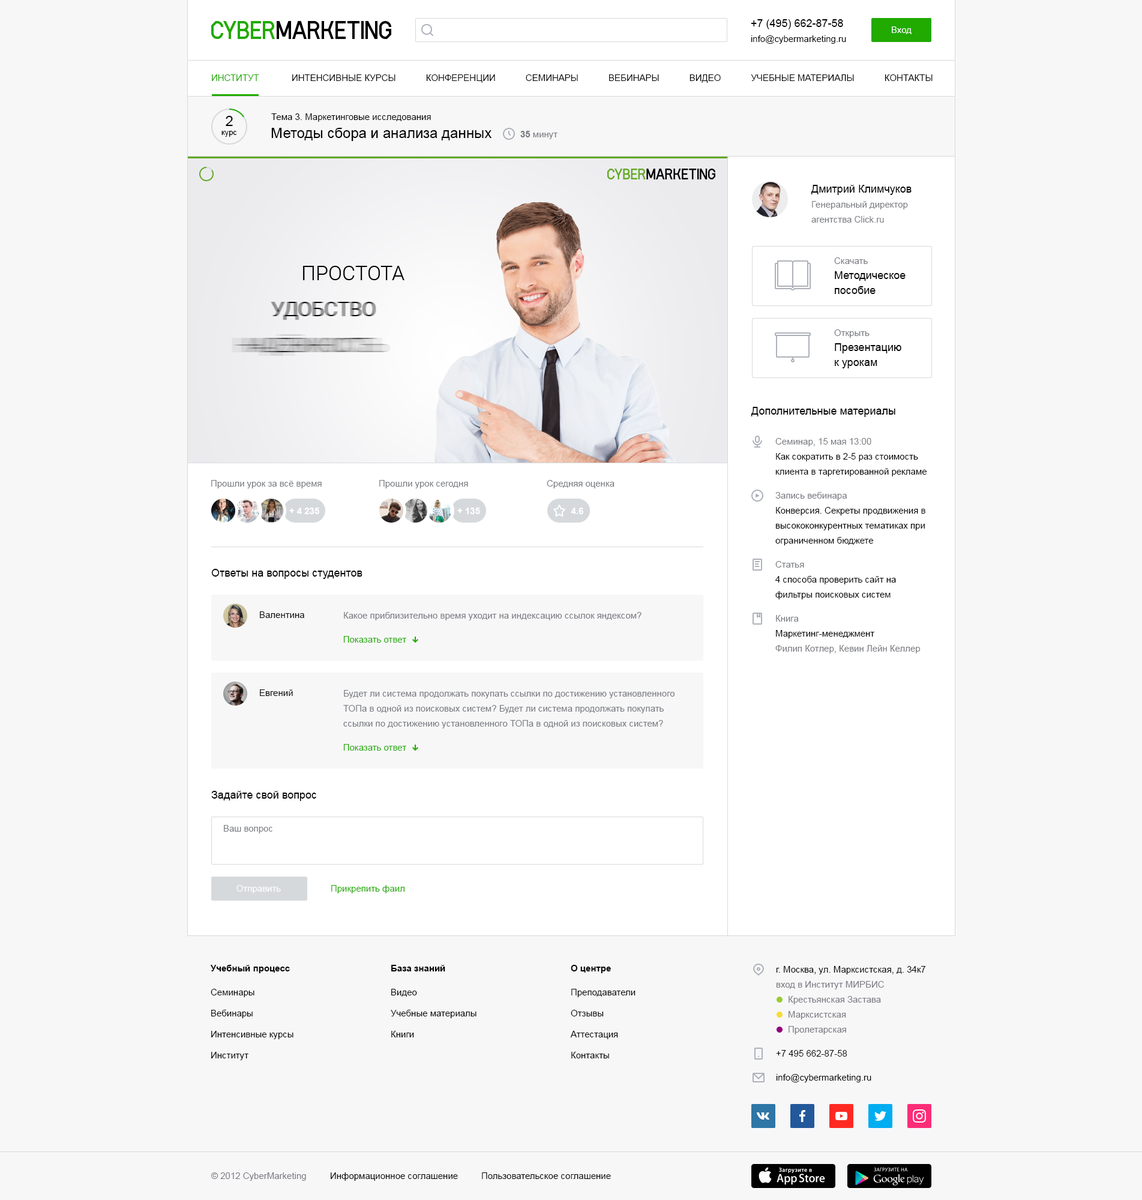
<style>
.page{position:relative;width:1142px;height:1200px;background:#f7f7f8}
.page>*{position:absolute;margin:0}
.t1{font:10.8px "ArialMT";color:#000000}
.t2{font:9px "ArialMT";color:#ffffff}
.t3{font:9px "ArialMT";color:#000000}
.t4{font:9px "ArialMT";color:#000000;text-transform:uppercase}
.t5{font:9px "ArialMT";color:#21aa00;text-transform:uppercase}
.t6{font:14.4px "ArialMT";color:#000000}
.t7{font:7.8px "ArialMT";color:#000000}
.t8{font:9px "ArialMT";color:#787a80}
.t9{font:9px "Arial-BoldMT";color:#787a80}
.t10{font:9px/15px "ArialMT";color:#787a80}
.t11{font:10.8px/15px "ArialMT";color:#000000}
.t12{font:9px/15px "ArialMT";color:#000000}
.t13{font:9px "Arial-BoldMT";color:#ffffff;text-transform:uppercase}
.t14{font:9px "ArialMT";color:#21aa00}
.t15{font:9px "Arial-BoldMT";color:#000000}
.t16{font:9px/21px "ArialMT";color:#000000}
.t17{font:9px/24px "ArialMT";color:#000000}
</style>
<div class="page">
<p class="t1" style="left:751px;top:19px;width:92px;height:10px">+7 (495) 662-87-58</p>
<p class="t2" style="left:892px;top:26px;width:19px;height:8px">Вход</p>
<p class="t3" style="left:751px;top:35px;width:95px;height:9px">info@cybermarketing.ru</p>
<p class="t4" style="left:212px;top:74px;width:720px;height:9px"><span class="t5">Институт             </span>Интенсивные курсы            конференции            Семинары            вебинары            Видео            Учебные материалы            Контакты</p>
<p class="t3" style="left:271px;top:113px;width:160px;height:9px">Тема 3. Маркетинговые исследования</p>
<p class="t6" style="left:226px;top:116px;width:7px;height:10px">2</p>
<p class="t7" style="left:221px;top:131px;width:15px;height:6px">курс</p>
<p class="t6" style="left:271px;top:128px;width:221px;height:13px">Методы сбора и анализа данных</p>
<p class="t8" style="left:520px;top:131px;width:37px;height:8px"><span class="t9">35</span> минут</p>
<p class="t1" style="left:811px;top:185px;width:100px;height:10px">Дмитрий Климчуков</p>
<p class="t10" style="left:811px;top:201px;width:97px;height:22px">Генеральный директор<br>агентства Click.ru</p>
<p class="t11" style="left:834px;top:257px;width:71px;height:37px"><span class="t10">Скачать<br></span>Методическое <br>пособие</p>
<p class="t11" style="left:834px;top:329px;width:67px;height:39px"><span class="t10">Открыть<br></span>Презентацию<br>к урокам</p>
<p class="t1" style="left:751px;top:407px;width:144px;height:10px">Дополнительные материалы</p>
<p class="t8" style="left:775px;top:438px;width:96px;height:8px">Семинар, 15 мая 13:00</p>
<p class="t12" style="left:775px;top:453px;width:152px;height:23px">Как сократить в 2-5 раз стоимость <br>клиента в таргетированной рекламе</p>
<p class="t8" style="left:211px;top:480px;width:111px;height:8px">Прошли урок за всё время</p>
<p class="t8" style="left:379px;top:480px;width:89px;height:8px">Прошли урок сегодня</p>
<p class="t8" style="left:547px;top:480px;width:67px;height:8px">Средняя оценка</p>
<p class="t8" style="left:775px;top:492px;width:72px;height:8px">Запись вебинара</p>
<p class="t13" style="left:289px;top:508px;width:30px;height:6px">+ 4 235</p>
<p class="t13" style="left:457px;top:508px;width:23px;height:6px">+ 135</p>
<p class="t13" style="left:571px;top:508px;width:12px;height:6px">4.6</p>
<p class="t12" style="left:775px;top:507px;width:150px;height:38px">Конверсия. Секреты продвижения в <br>высококонкурентных тематиках при <br>ограниченном бюджете</p>
<p class="t1" style="left:211px;top:569px;width:151px;height:10px">Ответы на вопросы студентов</p>
<p class="t8" style="left:775px;top:561px;width:29px;height:7px">Статья</p>
<p class="t12" style="left:775px;top:576px;width:121px;height:23px">4 способа проверить сайт на <br>фильтры поисковых систем</p>
<p class="t3" style="left:260px;top:611px;width:44px;height:7px">Валентина</p>
<p class="t8" style="left:344px;top:612px;width:297px;height:8px">Какое приблизительно время уходит на индексацию ссылок яндексом?</p>
<p class="t8" style="left:776px;top:615px;width:23px;height:7px">Книга</p>
<p class="t10" style="left:775px;top:630px;width:145px;height:23px"><span class="t12">Маркетинг-менеджмент<br></span>Филип Котлер, Кевин Лейн Келлер</p>
<p class="t14" style="left:343px;top:636px;width:63px;height:7px">Показать ответ</p>
<p class="t3" style="left:260px;top:689px;width:33px;height:7px">Евгений</p>
<p class="t10" style="left:343px;top:690px;width:332px;height:38px">Будет ли система продолжать покупать ссылки по достижению установленного <br>ТОПа в одной из поисковых систем? Будет ли система продолжать покупать <br>ссылки по достижению установленного ТОПа в одной из поисковых систем?</p>
<p class="t14" style="left:343px;top:744px;width:63px;height:7px">Показать ответ</p>
<p class="t1" style="left:211px;top:791px;width:105px;height:10px">Задайте свой вопрос</p>
<p class="t8" style="left:224px;top:825px;width:48px;height:8px">Ваш вопрос</p>
<p class="t2" style="left:236px;top:885px;width:45px;height:8px">Отправить</p>
<p class="t14" style="left:331px;top:885px;width:74px;height:8px">Прикрепить фаил</p>
<p class="t15" style="left:210px;top:965px;width:80px;height:8px">Учебный процесс</p>
<p class="t15" style="left:391px;top:965px;width:54px;height:6px">База знаний</p>
<p class="t15" style="left:571px;top:965px;width:40px;height:8px">О центре</p>
<p class="t12" style="left:776px;top:966px;width:150px;height:23px">г. Москва, ул. Марксистская, д. 34к7<br><span class="t10">вход в Институт МИРБИС</span></p>
<p class="t16" style="left:211px;top:989px;width:82px;height:71px">Семинары<br>Вебинары<br>Интенсивные курсы<br>Институт</p>
<p class="t16" style="left:391px;top:989px;width:85px;height:48px">Видео<br>Учебные материалы<br>Книги</p>
<p class="t16" style="left:570px;top:989px;width:65px;height:69px">Преподаватели<br>Отзывы<br>Аттестация<br>Контакты</p>
<p class="t8" style="left:788px;top:996px;width:93px;height:8px">Крестьянская Застава</p>
<p class="t8" style="left:788px;top:1011px;width:58px;height:8px">Марксистская</p>
<p class="t8" style="left:788px;top:1026px;width:58px;height:8px">Пролетарская</p>
<p class="t17" style="left:776px;top:1050px;width:95px;height:32px">+7 495 662-87-58<br>info@cybermarketing.ru</p>
<p class="t8" style="left:211px;top:1172px;width:95px;height:9px">© 2012 CyberMarketing</p>
<p class="t3" style="left:331px;top:1172px;width:127px;height:9px">Информационное соглашение</p>
<p class="t3" style="left:482px;top:1172px;width:129px;height:7px">Пользовательское соглашение</p>
</div>
